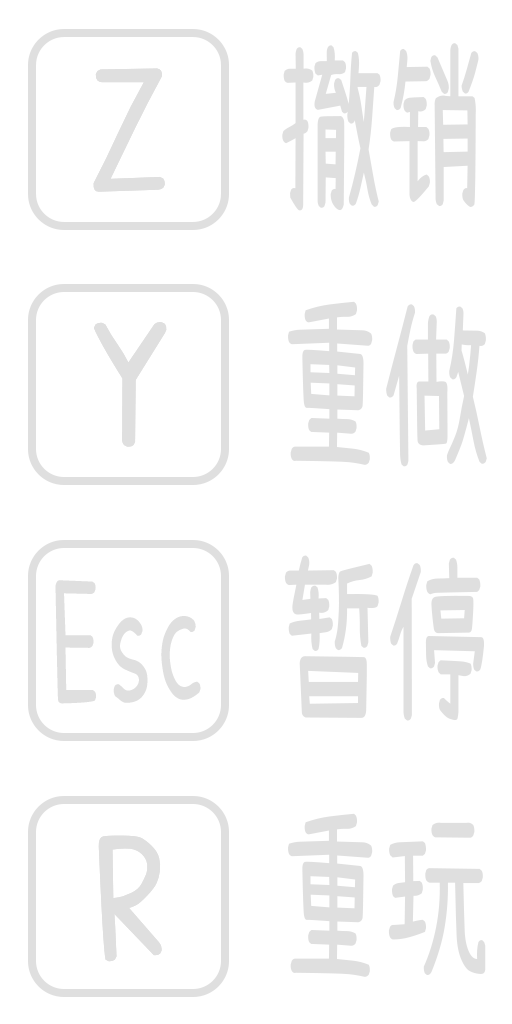
<style>
.page{position:relative;width:512px;height:1024px;background:#ffffff}
.page>*{position:absolute;margin:0}
.t1{font:184.6px "SetoFont-SC";color:#dfdfdf;scale:0.57 1}
.t2{font:160px "SetoFont-SC";color:#dfdfdf}
.t3{font:160px "SetoFont-SC";color:#dfdfdf;scale:0.66 1}
</style>
<div class="page">
<p class="t1" style="left:282px;top:43px;width:197px;height:168px">撤销</p>
<p class="t2" style="left:93px;top:68px;width:72px;height:124px">Z</p>
<p class="t1" style="left:288px;top:301px;width:199px;height:166px">重做</p>
<p class="t2" style="left:94px;top:322px;width:73px;height:125px">Y</p>
<p class="t1" style="left:284px;top:555px;width:200px;height:166px">暂停</p>
<p class="t3" style="left:55px;top:580px;width:146px;height:124px">Esc</p>
<p class="t1" style="left:288px;top:813px;width:198px;height:164px">重玩</p>
<p class="t2" style="left:98px;top:835px;width:64px;height:127px">R</p>
</div>
